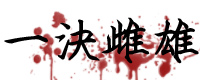
<style>
.page{position:relative;width:200px;height:80px;background:#ffffff}
.page>*{position:absolute;margin:0}
.t1{font:50px "HanWangWCL07";color:#000000}
</style>
<div class="page">
<p class="t1" style="left:4px;top:17px;width:195px;height:47px">一決雌雄</p>
</div>
